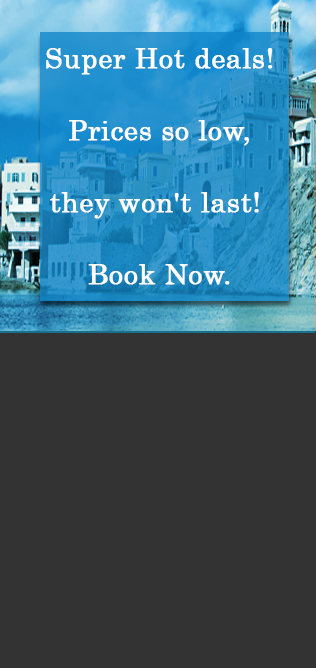
<style>
.page{position:relative;width:316px;height:668px;background:#333333}
.page>*{position:absolute;margin:0}
.t1{font:28.2px/72px "Century";color:#ffffff;font-weight:bold}
</style>
<div class="page">
<p class="t1" style="left:46px;top:48px;width:227px;height:237px;text-align:center">Super Hot deals!<br>Prices so low,<br>they won't last! <br>Book Now.</p>
</div>
